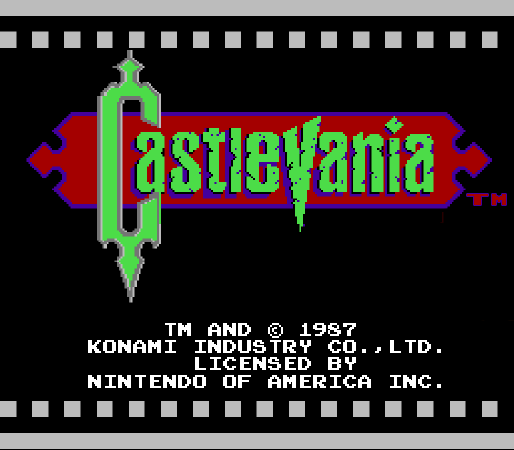
<style>
.page{position:relative;width:514px;height:450px;background:#000000}
.page>*{position:absolute;margin:0}
.t1{font:12.2px "PressStartReg";color:#a40000;scale:2.36 1}
.t2{font:12.2px "PressStartReg";color:#a40000;scale:1.31 1}
.t3{font:14.7px "PressStartReg";color:#ffffff}
</style>
<div class="page">
<p class="t1" style="left:467px;top:194px;width:21px;height:11px">T</p>
<p class="t2" style="left:492px;top:194px;width:14px;height:11px">M</p>
<p class="t3" style="left:165px;top:323px;width:11px;height:13px">T</p>
<p class="t3" style="left:178px;top:323px;width:178px;height:15px">M AND © 1987</p>
<p class="t3" style="left:88px;top:340px;width:353px;height:48px">KONAMI INDUSTRY CO.,LTD.<br>       LICENSED BY<br>NINTENDO OF AMERICA INC.</p>
</div>
